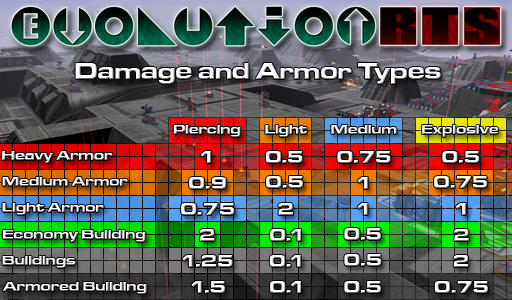
<style>
.page{position:relative;width:512px;height:300px}
.page>*{position:absolute;margin:0}
.t1{font:24px "MicrogrammaD-BoldExte";color:#ffffff}
.t2{font:14px "MicrogrammaD-BoldExte"}
.t3{font:18px "MicrogrammaD-BoldExte";color:#ffffff}
.t4{font:18px "MicrogrammaD-BoldExte";color:#fefefe}
</style>
<div class="page">
<p class="t1" style="left:75px;top:63px;width:366px;height:21px">Damage and Armor Types</p>
<p class="t2" style="left:173px;top:125px;width:68px;height:12px">Piercing</p>
<p class="t2" style="left:265px;top:125px;width:42px;height:12px">Light</p>
<p class="t2" style="left:331px;top:125px;width:66px;height:9px">Medium</p>
<p class="t2" style="left:422px;top:125px;width:77px;height:12px">Explosive</p>
<p class="t2" style="left:2px;top:151px;width:111px;height:12px">Heavy Armor</p>
<p class="t3" style="left:200px;top:151px;width:11px;height:12px">1</p>
<p class="t4" style="left:265px;top:151px;width:38px;height:12px">0.5</p>
<p class="t3" style="left:337px;top:151px;width:54px;height:12px">0.75</p>
<p class="t3" style="left:442px;top:151px;width:38px;height:12px">0.5</p>
<p class="t2" style="left:2px;top:177px;width:126px;height:9px">Medium Armor</p>
<p class="t3" style="left:189px;top:177px;width:38px;height:12px">0.9</p>
<p class="t3" style="left:266px;top:176px;width:37px;height:12px">0.5</p>
<p class="t3" style="left:357px;top:177px;width:11px;height:12px">1</p>
<p class="t3" style="left:434px;top:176px;width:54px;height:12px">0.75</p>
<p class="t2" style="left:2px;top:203px;width:102px;height:12px">Light Armor</p>
<p class="t3" style="left:181px;top:203px;width:54px;height:12px">0.75</p>
<p class="t3" style="left:278px;top:203px;width:15px;height:12px">2</p>
<p class="t3" style="left:357px;top:203px;width:11px;height:12px">1</p>
<p class="t3" style="left:455px;top:203px;width:11px;height:12px">1</p>
<p class="t2" style="left:2px;top:230px;width:144px;height:12px">Economy Building</p>
<p class="t3" style="left:200px;top:229px;width:15px;height:12px">2</p>
<p class="t3" style="left:270px;top:229px;width:31px;height:12px">0.1</p>
<p class="t3" style="left:344px;top:228px;width:37px;height:12px">0.5</p>
<p class="t3" style="left:454px;top:229px;width:15px;height:12px">2</p>
<p class="t2" style="left:2px;top:256px;width:74px;height:12px">Buildings</p>
<p class="t3" style="left:182px;top:255px;width:51px;height:12px">1.25</p>
<p class="t3" style="left:269px;top:255px;width:32px;height:12px">0.1</p>
<p class="t3" style="left:344px;top:254px;width:38px;height:12px">0.5</p>
<p class="t3" style="left:453px;top:255px;width:16px;height:12px">2</p>
<p class="t3" style="left:191px;top:281px;width:34px;height:12px">1.5</p>
<p class="t3" style="left:270px;top:281px;width:31px;height:12px">0.1</p>
<p class="t3" style="left:344px;top:281px;width:37px;height:12px">0.5</p>
<p class="t3" style="left:434px;top:281px;width:54px;height:12px">0.75</p>
<p class="t2" style="left:2px;top:282px;width:145px;height:12px">Armored Building</p>
</div>
